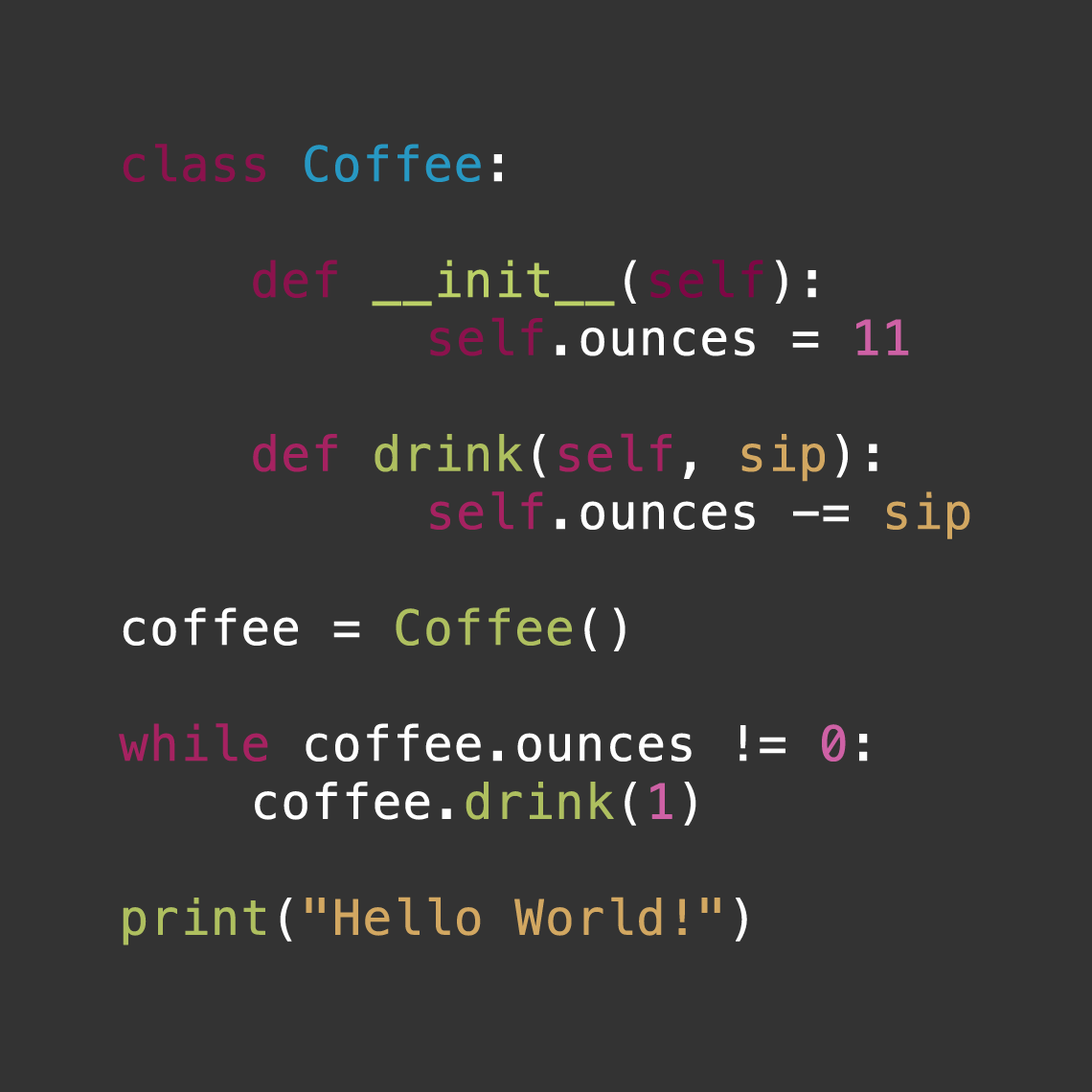
<style>
.page{position:relative;width:1092px;height:1092px;background:#333333}
.page>*{position:absolute;margin:0}
.t1{font:48.3px "Menlo-Regular";color:#ffffff;font-weight:bold}
.t2{font:48.3px "Menlo-Regular";color:#8c124d;font-weight:bold}
.t3{font:48.3px "Menlo-Regular";color:#2798c3;font-weight:bold}
.t4{font:48.3px "Menlo-Regular";color:#bbd066;font-weight:bold}
.t5{font:48.3px "Menlo-Regular";color:#7e0745;font-weight:bold}
.t6{font:48.3px "Menlo-Regular";color:#ce61a5;font-weight:bold}
.t7{font:48.3px "Menlo-Regular";color:#a62261;font-weight:bold}
.t8{font:48.3px "Menlo-Regular";color:#aebf5f;font-weight:bold}
.t9{font:48.3px "Menlo-Regular";color:#d2a761;font-weight:bold}
</style>
<div class="page">
<p class="t1" style="left:119px;top:144px;width:851px;height:801px"><span class="t2">class </span><span class="t3">Coffee</span>:<br><br>   <span class="t2">def </span><span class="t4">__init__</span>(<span class="t5">self</span>):<br>  <span class="t2">     self</span>.ounces = <span class="t6">11<br><br>   </span><span class="t7">def </span><span class="t8">drink</span>(<span class="t7">self</span>, <span class="t9">sip</span>):<br>  <span class="t7">     self</span>.ounces -= <span class="t9">sip<br></span><br>coffee = <span class="t8">Coffee</span>()<br><br><span class="t7">while </span>coffee.ounces != <span class="t6">0</span>:<br>   coffee.<span class="t8">drink</span>(<span class="t6">1</span>)<br><br><span class="t8">print</span>(<span class="t9">"Hello World!"</span>)</p>
</div>
